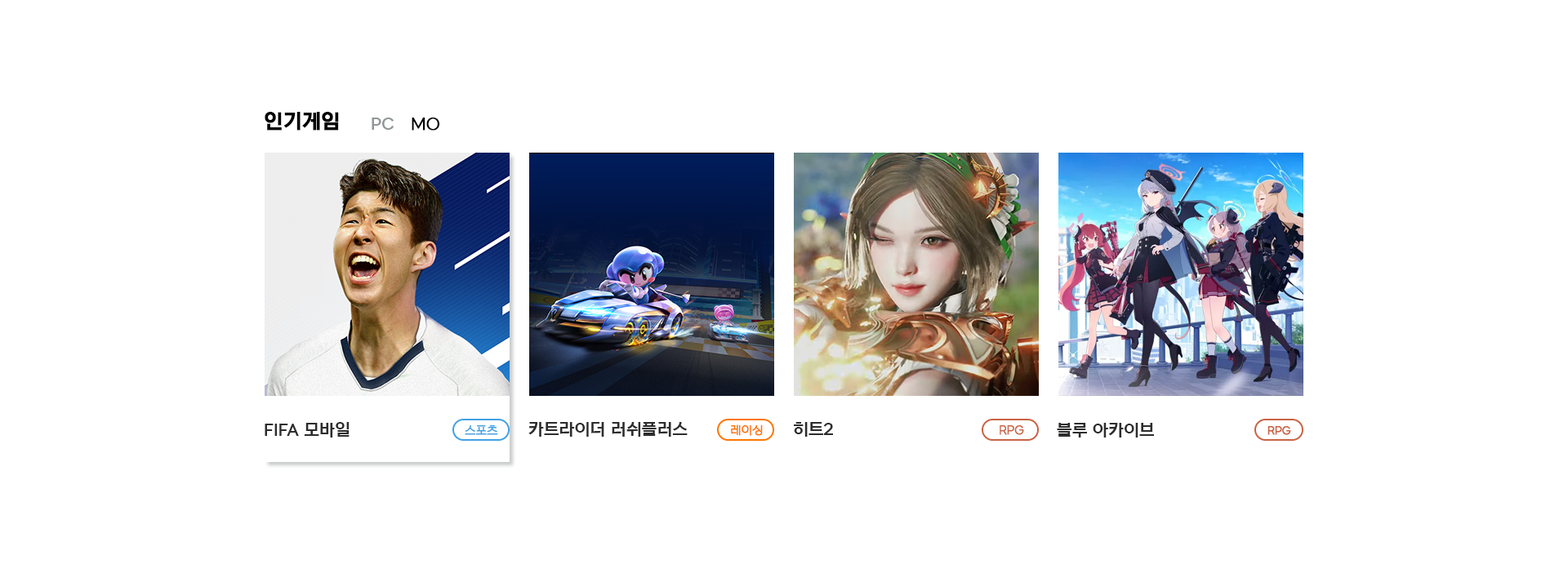
<style>
.page{position:relative;width:1568px;height:573px;background:#ffffff}
.page>*{position:absolute;margin:0}
.t1{font:19.6px "NEXONLv1GothicBold";color:#000000;font-weight:bold}
.t2{font:16.3px "NEXONLv1GothicBold";color:#929898}
.t3{font:16.3px "NEXONLv1GothicRegular";color:#000000;font-weight:bold}
.t4{font:16.3px "NEXONLv1GothicBold";color:#2d2d2d}
.t5{font:11.4px "NEXONLv1GothicRegular";color:#41a1e4;font-weight:bold}
.t6{font:11.4px "NEXONLv1GothicRegular";color:#ff7601;font-weight:bold}
.t7{font:11.4px "NEXONLv1GothicRegular";color:#c96243;font-weight:bold}
.t8{font:10.6px "NEXONLv1GothicRegular";color:#c96243;font-weight:bold}
</style>
<div class="page">
<p class="t1" style="left:265px;top:112px;width:74px;height:19px">인기게임</p>
<p class="t2" style="left:372px;top:118px;width:22px;height:12px">PC</p>
<p class="t3" style="left:412px;top:118px;width:28px;height:13px">MO</p>
<p class="t4" style="left:265px;top:422px;width:85px;height:16px">FIFA 모바일</p>
<p class="t5" style="left:465px;top:425px;width:33px;height:10px">스포츠</p>
<p class="t4" style="left:528px;top:422px;width:160px;height:15px">카트라이더 러쉬플러스</p>
<p class="t6" style="left:731px;top:425px;width:32px;height:11px">레이싱</p>
<p class="t4" style="left:794px;top:422px;width:39px;height:15px">히트2</p>
<p class="t7" style="left:1000px;top:425px;width:24px;height:10px">RPG</p>
<p class="t4" style="left:1057px;top:423px;width:97px;height:15px">블루 아카이브</p>
<p class="t8" style="left:1267px;top:426px;width:24px;height:9px">RPG</p>
</div>
